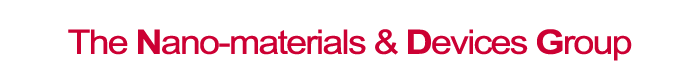
<style>
.page{position:relative;width:700px;height:75px;background:#ffffff}
.page>*{position:absolute;margin:0}
.t1{font:33.6px "ArialMT";letter-spacing:-0.05em;color:#cc0033;scale:1.12 1}
.t2{font:29.1px "ArialMT";letter-spacing:-0.05em;color:#cc0033;scale:1.12 1}
.t3{font:33.6px "Arial-BoldMT";letter-spacing:-0.05em;color:#cc0033;scale:1.12 1}
</style>
<div class="page">
<p class="t1" style="left:68px;top:29px;width:564px;height:32px"><span class="t2"><br></span>The <span class="t3">N</span>ano-materials &amp; <span class="t3">D</span>evices <span class="t3">G</span>roup</p>
</div>
